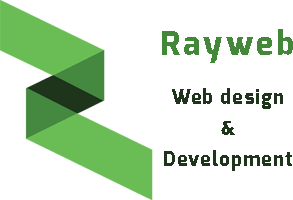
<style>
.page{position:relative;width:293px;height:200px;background:#ffffff}
.page>*{position:absolute;margin:0}
.t1{font:33px "Exo-ExtraBold";letter-spacing:0.1em;color:#438838}
.t2{font:20px "Exo-ExtraBold";letter-spacing:0.05em;color:#1e351b}
</style>
<div class="page">
<p class="t1" style="left:162px;top:29px;width:131px;height:34px">Rayweb</p>
<p class="t2" style="left:164px;top:88px;width:128px;height:83px;text-align:center">Web design<br>&amp;<br>Development</p>
</div>
